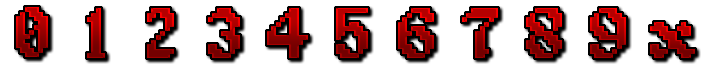
<style>
.page{position:relative;width:704px;height:64px;background:#ffffff}
.page>*{position:absolute;margin:0}
.t1{font:72px "Alagard"}
</style>
<div class="page">
<p class="t1" style="left:16px;top:7px;width:32px;height:50px">0</p>
<p class="t1" style="left:87px;top:8px;width:18px;height:50px">1</p>
<p class="t1" style="left:147px;top:8px;width:27px;height:50px">2</p>
<p class="t1" style="left:208px;top:8px;width:32px;height:50px">3</p>
<p class="t1" style="left:267px;top:8px;width:41px;height:50px">4</p>
<p class="t1" style="left:336px;top:8px;width:32px;height:50px">5</p>
<p class="t1" style="left:398px;top:8px;width:36px;height:50px">6</p>
<p class="t1" style="left:462px;top:8px;width:36px;height:50px">7</p>
<p class="t1" style="left:526px;top:8px;width:36px;height:50px">8</p>
<p class="t1" style="left:590px;top:8px;width:36px;height:50px">9</p>
<p class="t1" style="left:650px;top:22px;width:45px;height:36px">x</p>
</div>
